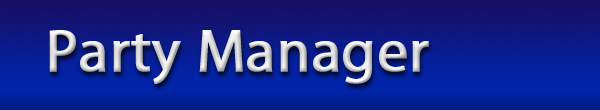
<style>
.page{position:relative;width:600px;height:110px}
.page>*{position:absolute;margin:0}
.t1{font:60px "MyriadPro-Regular";color:#dadada;font-weight:bold}
</style>
<div class="page">
<p class="t1" style="left:49px;top:30px;width:380px;height:54px">Party Manager</p>
</div>
